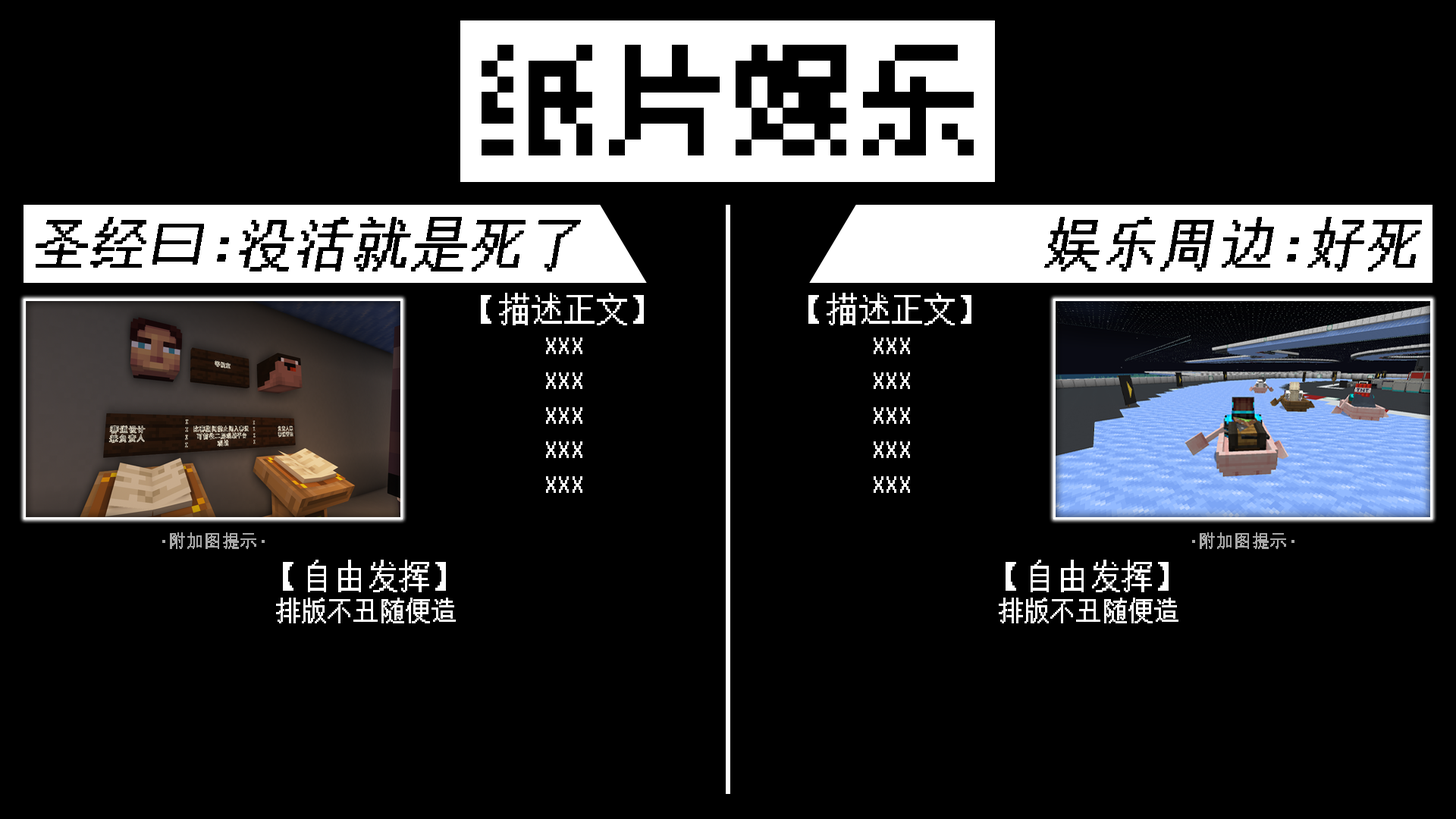
<style>
.page{position:relative;width:1456px;height:819px;background:#000000}
.page>*{position:absolute;margin:0}
.t1{font:126.4px "ChillBitmap7x";letter-spacing:0.01em;color:#000000}
.t2{font:126.4px "ChillBitmap7x";color:#000000}
.t3{font:53.7px "Minecraft";letter-spacing:0.05em;color:#000000;font-weight:bold;font-style:italic}
.t4{font:25.3px/34.8px "Minecraft";color:#ffffff;font-weight:bold}
.t5{font:31.6px/37.9px "Minecraft";color:#ffffff;font-weight:bold}
.t6{font:15.8px "Minecraft";letter-spacing:0.1em;color:#a8a8a8;font-weight:bold}
</style>
<div class="page">
<p class="t1" style="left:482px;top:45px;width:492px;height:110px">纸<span class="t2">片</span>娱乐</p>
<p class="t3" style="left:36px;top:217px;width:545px;height:54px">圣经曰:没活就是死了</p>
<p class="t3" style="left:1044px;top:217px;width:378px;height:54px">娱乐周边:好死</p>
<p class="t4" style="left:481px;top:293px;width:163px;height:200px;text-align:center"><span class="t5">【描述正文】<br></span>XXX<br>XXX<br>XXX<br>XXX<br>XXX</p>
<p class="t4" style="left:808px;top:293px;width:163px;height:200px;text-align:center"><span class="t5">【描述正文】<br></span>XXX<br>XXX<br>XXX<br>XXX<br>XXX</p>
<p class="t6" style="left:162px;top:532px;width:103px;height:17px">·附加图提示·</p>
<p class="t6" style="left:1192px;top:532px;width:102px;height:17px">·附加图提示·</p>
<p class="t4" style="left:276px;top:560px;width:180px;height:63px;text-align:center"><span class="t5">【自由发挥】<br></span>排版不丑随便造</p>
<p class="t4" style="left:999px;top:560px;width:179px;height:63px;text-align:center"><span class="t5">【自由发挥】<br></span>排版不丑随便造</p>
</div>
